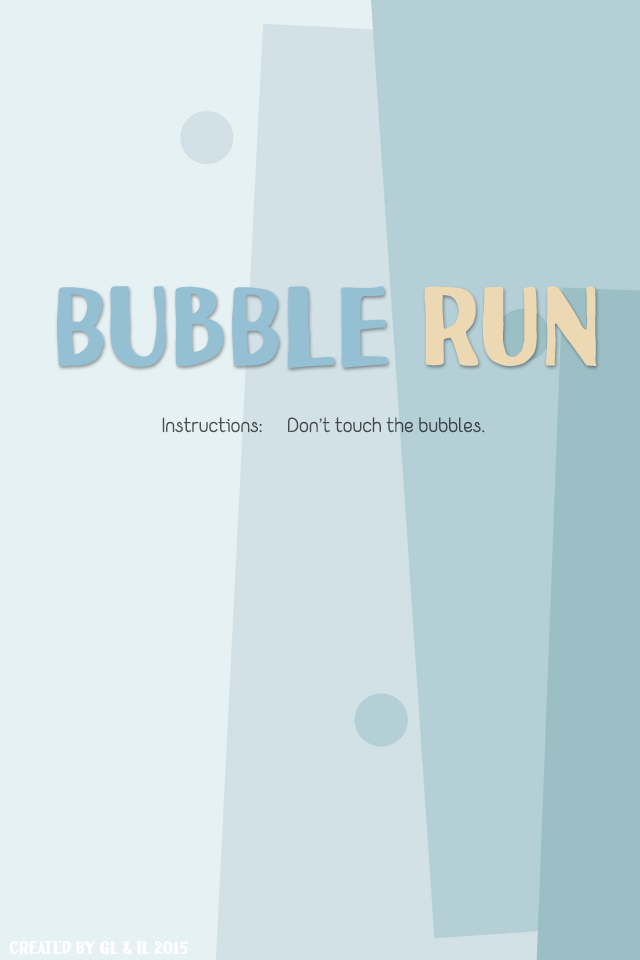
<style>
.page{position:relative;width:640px;height:960px;background:#e6f1f3}
.page>*{position:absolute;margin:0}
.t1{font:101.2px "Uchiyama-Regular";color:#95c0d3}
.t2{font:101.2px "Uchiyama-Regular";color:#ecd9b3}
.t3{font:18.7px "Yaahowu";color:#44494b}
.t4{font:16px "Uchiyama-Regular";color:#ffffff}
</style>
<div class="page">
<p class="t1" style="left:57px;top:286px;width:540px;height:83px">BUBBLE <span class="t2">RUN</span></p>
<p class="t3" style="left:162px;top:417px;width:323px;height:16px">Instructions:  Don’t touch the bubbles.</p>
<p class="t4" style="left:9px;top:941px;width:179px;height:14px">created by gL &amp; IL 2015</p>
</div>
